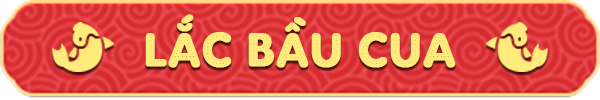
<style>
.page{position:relative;width:600px;height:100px}
.page>*{position:absolute;margin:0}
.t1{font:48px "SVN-AdamGorry";color:#ffeb7b;font-weight:bold}
</style>
<div class="page">
<p class="t1" style="left:145px;top:14px;width:311px;height:54px">LẮC BẦU CUA</p>
</div>
